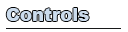
<style>
.page{position:relative;width:128px;height:32px;background:#ffffff}
.page>*{position:absolute;margin:0}
.t1{font:18px "Arial-Black";color:#ccdced}
</style>
<div class="page">
<p class="t1" style="left:6px;top:8px;width:83px;height:13px">Controls</p>
</div>
